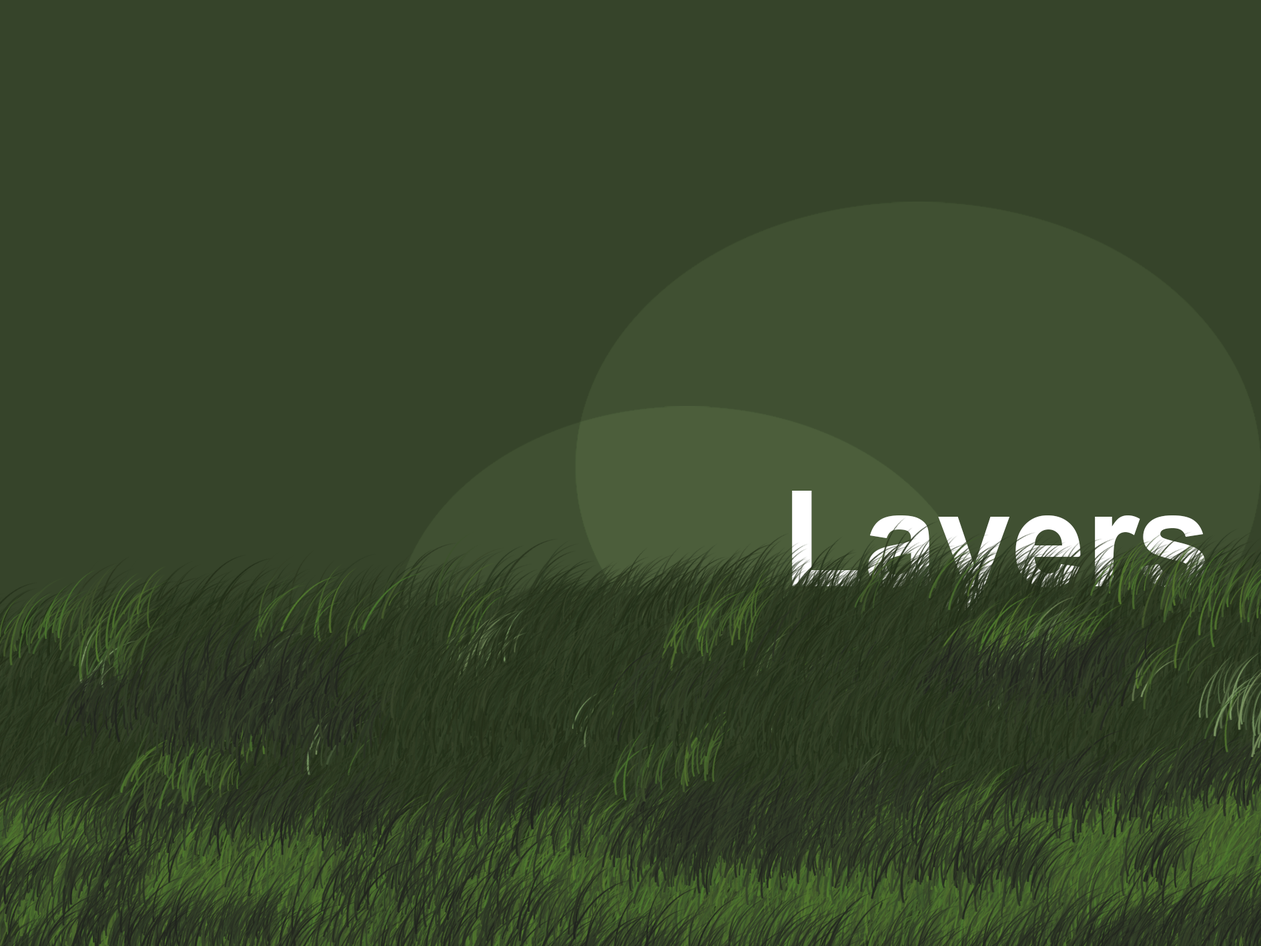
<style>
.page{position:relative;width:1261px;height:946px;background:#36442a}
.page>*{position:absolute;margin:0}
.t1{font:133.5px "Arial-BoldMT"}
</style>
<div class="page">
<p class="t1" style="left:792px;top:490px;width:414px;height:124px">Layers</p>
</div>
